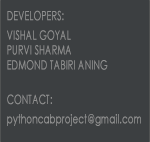
<style>
.page{position:relative;width:150px;height:142px;background:#3c3f41}
.page>*{position:absolute;margin:0}
.t1{font:12.5px/19.5px "CenturyGothic";color:#909090;font-weight:bold;scale:0.69 1}
.t2{font:12.5px "CenturyGothic";color:#909090;font-weight:bold;scale:0.69 1}
</style>
<div class="page">
<p class="t1" style="left:7px;top:10px;width:134px;height:116px">DEVELOPERS:<br>VISHAL GOYAL<br><span class="t2">PURVI SHARMA<br>EDMOND TABIRI ANING<br><br></span>CONTACT:<br>pythoncabproject@gmail.com</p>
</div>
